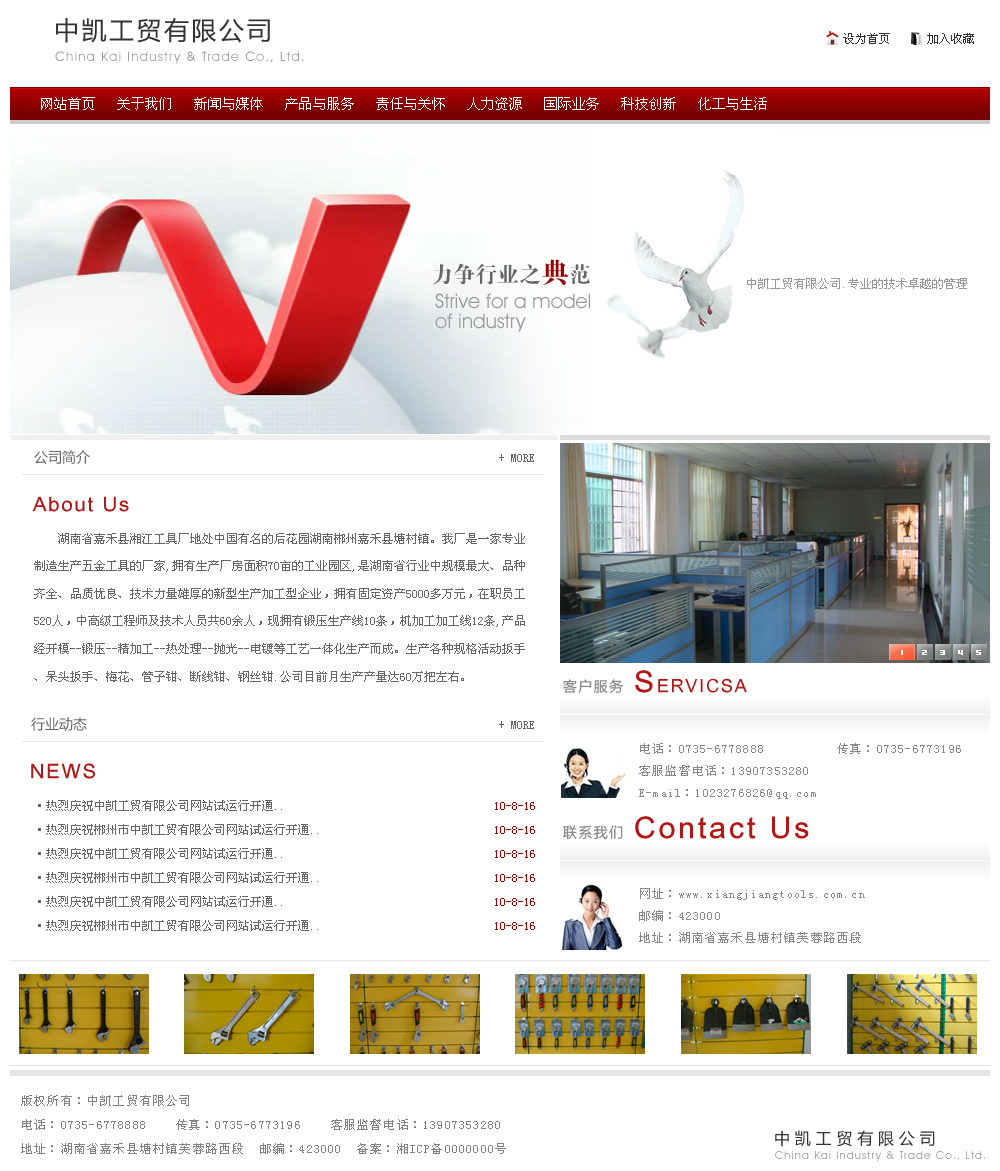
<style>
.page{position:relative;width:1000px;height:1171px;background:#ffffff}
.page>*{position:absolute;margin:0}
.t1{font:25px "Î¢ÈíÑÅºÚ";letter-spacing:0.1em;color:#333333}
.t2{font:12px "ËÎÌå";color:#333333}
.t3{font:13px "AvantGarde Bk BT";letter-spacing:0.1em;color:#999999}
.t4{font:14px "SimSun";color:#ffffff;text-transform:uppercase}
.t5{font:14px "Î¢ÈíÑÅºÚ";color:#666666}
.t6{font:12px "ËÎÌå";color:#666666}
.t7{font:20px "Arial Unicode MS";letter-spacing:0.1em;color:#b21616}
.t8{font:12px/27.6px "SimSun";color:#666666}
.t9{font:18px "Arial Unicode MS";letter-spacing:0.1em;color:#b21616}
.t10{font:30px "Arial Unicode MS";letter-spacing:0.1em;color:#b21616}
.t11{font:14px "Î¢ÈíÑÅºÚ";letter-spacing:0.1em;color:#8a8a8a}
.t12{font:12px/22px "SimSun";letter-spacing:0.1em;color:#898989}
.t13{font:12px/24px "SimSun";color:#666666}
.t14{font:12px/24px "ËÎÌå";color:#990000}
</style>
<div class="page">
<p class="t1" style="left:56px;top:18px;width:214px;height:25px">中凯工贸有限公司</p>
<p class="t2" style="left:843px;top:33px;width:131px;height:11px">设为首页      加入收藏</p>
<p class="t3" style="left:55px;top:51px;width:249px;height:13px">China Kai Industry &amp; Trade Co., Ltd.</p>
<p class="t4" style="left:41px;top:97px;width:726px;height:13px">网站首页   关于我们   新闻与媒体   产品与服务   责任与关怀   人力资源   国际业务   科技创新   化工与生活</p>
<p class="t5" style="left:34px;top:450px;width:56px;height:14px">公司简介</p>
<p class="t6" style="left:499px;top:454px;width:35px;height:8px">+ MORE</p>
<p class="t7" style="left:32px;top:496px;width:97px;height:16px">About Us</p>
<p class="t8" style="left:34px;top:533px;width:491px;height:149px">湖南省嘉禾县湘江工具厂地处中国有名的后花园湖南郴州嘉禾县塘村镇。我厂是一家专业<br>制造生产五金工具的厂家,拥有生产厂房面积70亩的工业园区,是湖南省行业中规模最大、品种<br>齐全、品质优良、技术力量雄厚的新型生产加工型企业，拥有固定资产5000多万元，在职员工<br>520人，中高级工程师及技术人员共60余人，现拥有锻压生产线10条，机加工加工线12条,产品<br>经开模--锻压--精加工--热处理--抛光--电镀等工艺一体化生产而成。生产各种规格活动扳手<br>、呆头扳手、梅花、管子钳、断线钳、钢丝钳.公司目前月生产产量达60万把左右。</p>
<p class="t9" style="left:635px;top:670px;width:112px;height:23px"><span class="t10">S</span>ERVICSA</p>
<p class="t11" style="left:562px;top:679px;width:61px;height:15px">客户服务</p>
<p class="t5" style="left:31px;top:717px;width:56px;height:14px">行业动态</p>
<p class="t6" style="left:499px;top:721px;width:35px;height:8px">+ MORE</p>
<p class="t12" style="left:639px;top:743px;width:322px;height:56px">电话：0735-6778888          传真：0735-6773196<br>客服监督电话：13907353280    <br>E-mail：1023276826@qq.com</p>
<p class="t7" style="left:31px;top:763px;width:64px;height:16px">NEWS</p>
<p class="t13" style="left:38px;top:800px;width:280px;height:131px">·热烈庆祝中凯工贸有限公司网站试运行开通..<br>·热烈庆祝郴州市中凯工贸有限公司网站试运行开通..<br>·热烈庆祝中凯工贸有限公司网站试运行开通..<br>·热烈庆祝郴州市中凯工贸有限公司网站试运行开通..<br>·热烈庆祝中凯工贸有限公司网站试运行开通..<br>·热烈庆祝郴州市中凯工贸有限公司网站试运行开通..</p>
<p class="t14" style="left:495px;top:802px;width:40px;height:128px">10-8-16<br>10-8-16<br>10-8-16<br>10-8-16<br>10-8-16<br>10-8-16</p>
<p class="t10" style="left:635px;top:816px;width:174px;height:23px">Contact Us</p>
<p class="t11" style="left:563px;top:825px;width:60px;height:15px">联系我们</p>
<p class="t12" style="left:639px;top:888px;width:226px;height:55px">网址：www.xiangjiangtools.com.cn<br>邮编：423000<br>地址：湖南省嘉禾县塘村镇芙蓉路西段</p>
</div>
